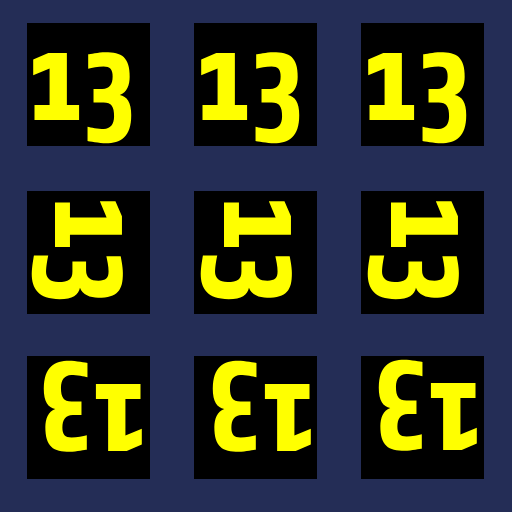
<style>
.page{position:relative;width:512px;height:512px;background:#242d56}
.page>*{position:absolute;margin:0}
.t1{font:130px "Share-BoldOSF";color:#ffff00}
</style>
<div class="page">
<p class="t1" style="left:33px;top:52px;width:99px;height:92px">13</p>
<p class="t1" style="left:201px;top:52px;width:99px;height:92px">13</p>
<p class="t1" style="left:368px;top:52px;width:99px;height:92px">13</p>
<p class="t1" style="left:31px;top:201px;width:92px;height:99px;rotate:90deg">13</p>
<p class="t1" style="left:200px;top:201px;width:92px;height:99px;rotate:90deg">13</p>
<p class="t1" style="left:367px;top:201px;width:92px;height:99px;rotate:90deg">13</p>
<p class="t1" style="left:43px;top:360px;width:99px;height:92px;rotate:-180deg">13</p>
<p class="t1" style="left:212px;top:360px;width:99px;height:92px;rotate:-180deg">13</p>
<p class="t1" style="left:378px;top:359px;width:99px;height:92px;rotate:-180deg">13</p>
</div>
